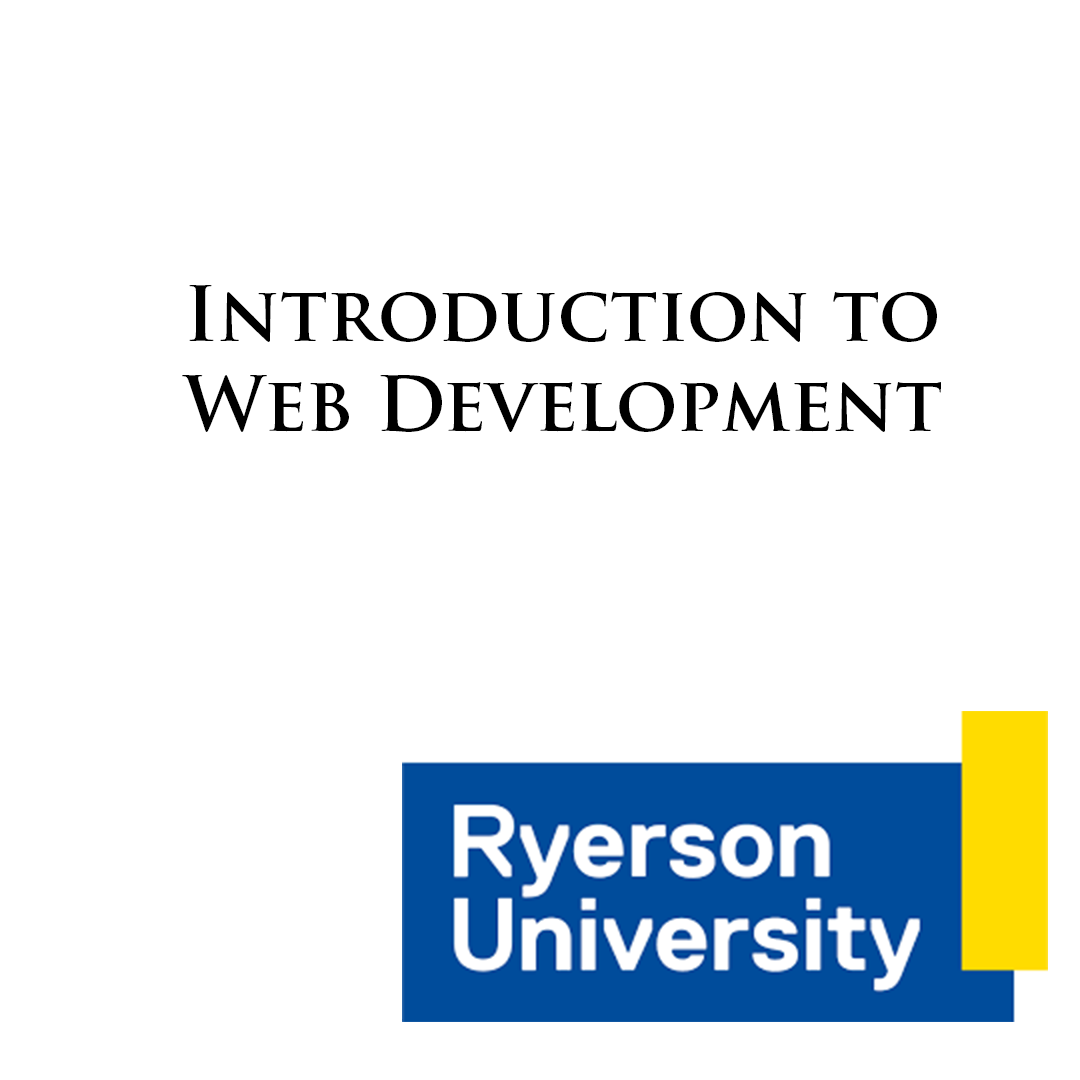
<style>
.page{position:relative;width:1080px;height:1080px;background:#ffffff}
.page>*{position:absolute;margin:0}
.t1{font:75px "TrajanPro-Bold";color:#000000}
</style>
<div class="page">
<p class="t1" style="left:182px;top:285px;width:759px;height:147px;text-align:center">Introduction to<br>Web Development</p>
</div>
